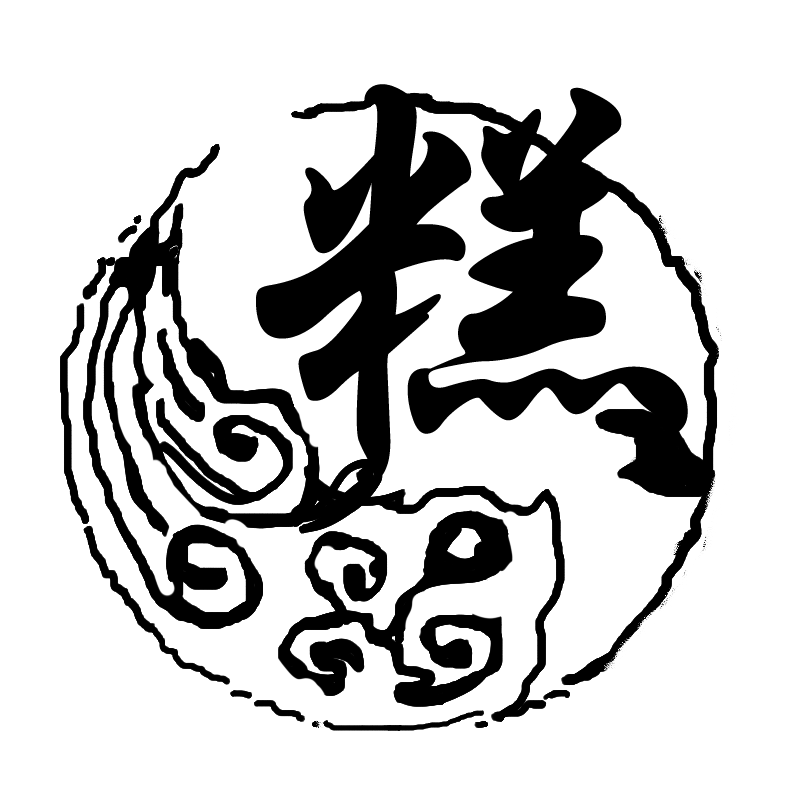
<style>
.page{position:relative;width:800px;height:800px;background:#ffffff}
.page>*{position:absolute;margin:0}
.t1{font:514.4px "STXingkai";color:#000000}
</style>
<div class="page">
<p class="t1" style="left:256px;top:84px;width:432px;height:392px">糕</p>
</div>
